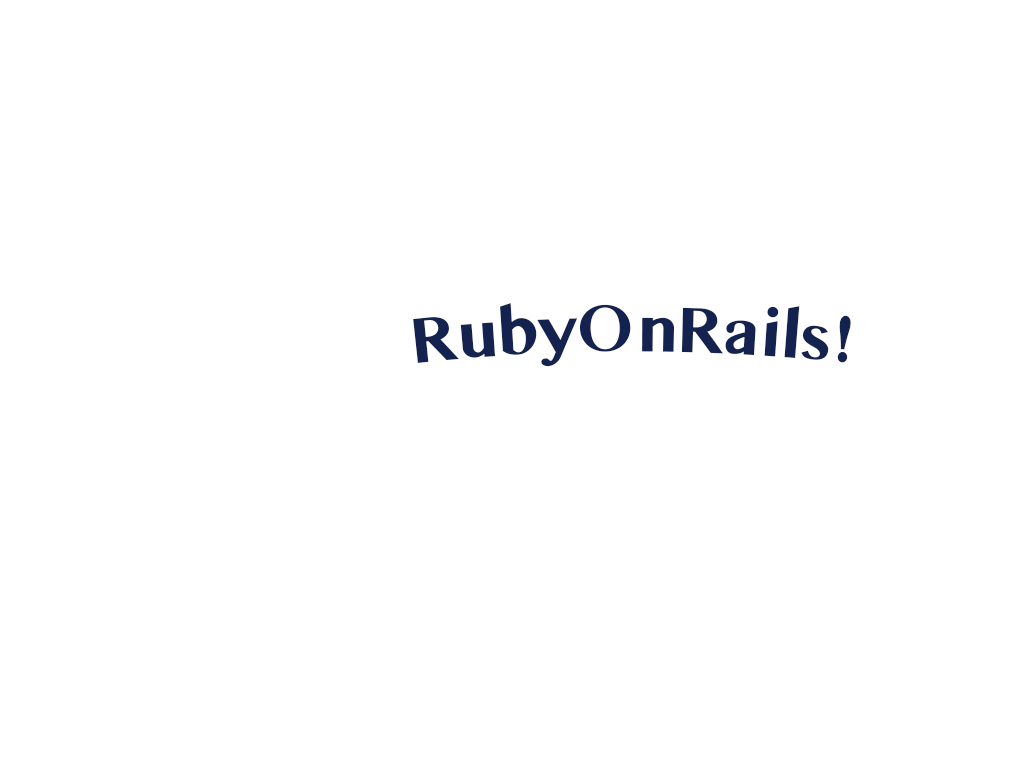
<style>
.page{position:relative;width:1024px;height:768px;background:#ffffff}
.page>*{position:absolute;margin:0}
.t1{font:93.3px "SinhalaMN-Bold";color:#13224e}
</style>
<div class="page">
<p class="t1" style="left:413px;top:303px;width:438px;height:64px">RubyOnRails!</p>
</div>
